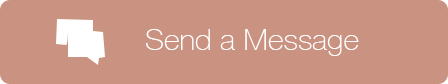
<style>
.page{position:relative;width:448px;height:84px;background:#ca9280}
.page>*{position:absolute;margin:0}
.t1{font:30px "HelveticaNeue-Thin";color:#ffffff}
</style>
<div class="page">
<p class="t1" style="left:146px;top:29px;width:213px;height:27px">Send a Message</p>
</div>
